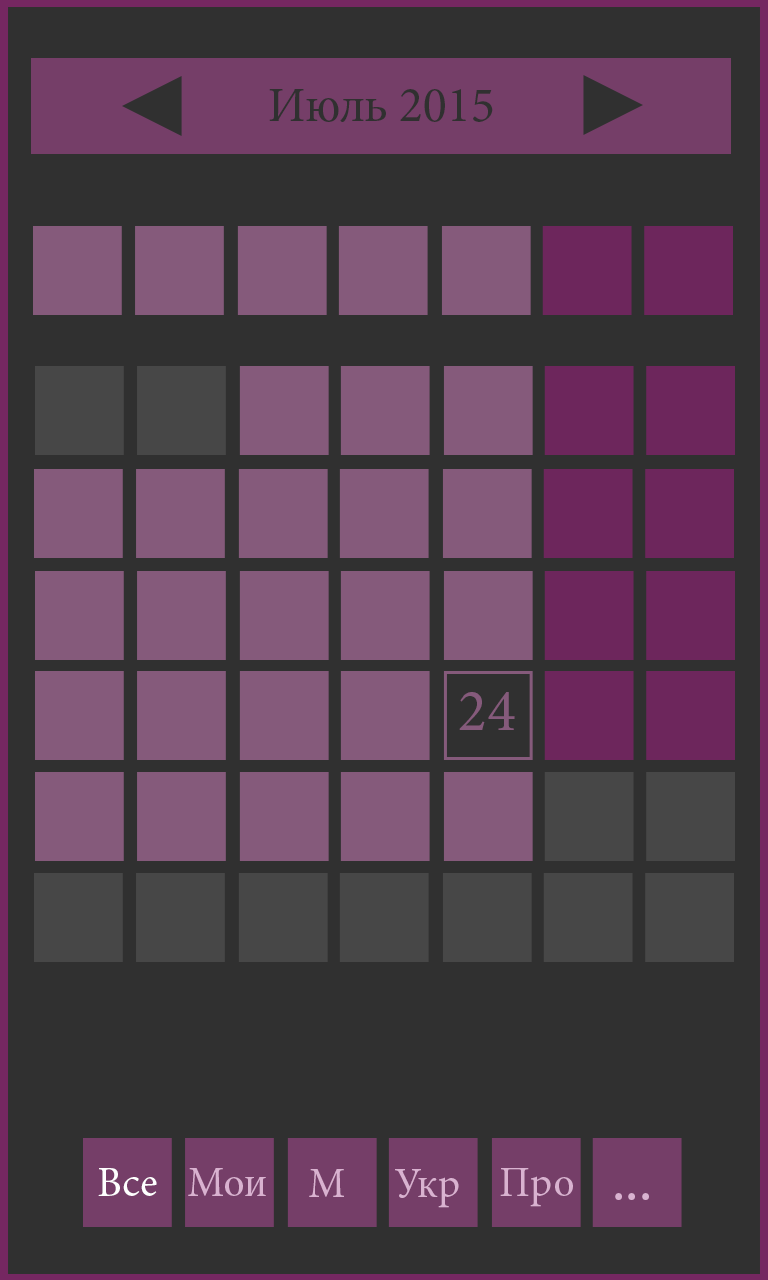
<style>
.page{position:relative;width:768px;height:1280px;background:#303030}
.page>*{position:absolute;margin:0}
.t1{font:50px "MinionPro-Regular";color:#303030}
.t2{font:60px "MinionPro-Regular";color:#855a7b}
.t3{font:42px "MinionPro-Regular";color:#ffffff}
.t4{font:42px "MinionPro-Regular";color:#d9b2d0}
.t5{font:60px "MinionPro-Regular";color:#d9b2d0}
</style>
<div class="page">
<p class="t1" style="left:269px;top:89px;width:224px;height:33px">Июль 2015</p>
<p class="t2" style="left:459px;top:692px;width:56px;height:38px">24</p>
<p class="t3" style="left:98px;top:1168px;width:59px;height:28px">Все</p>
<p class="t4" style="left:188px;top:1168px;width:78px;height:28px">Мои</p>
<p class="t4" style="left:309px;top:1169px;width:35px;height:28px">М</p>
<p class="t4" style="left:395px;top:1169px;width:64px;height:39px">Укр</p>
<p class="t4" style="left:500px;top:1168px;width:73px;height:39px">Про</p>
<p class="t5" style="left:615px;top:1193px;width:34px;height:7px">...</p>
</div>
